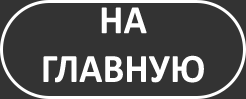
<style>
.page{position:relative;width:246px;height:99px;background:#333333}
.page>*{position:absolute;margin:0}
.t1{font:40.6px "Calibri-Bold";color:#ffffff;scale:0.95 1}
</style>
<div class="page">
<p class="t1" style="left:43px;top:7px;width:161px;height:76px;text-align:center">НА ГЛАВНУЮ</p>
</div>
